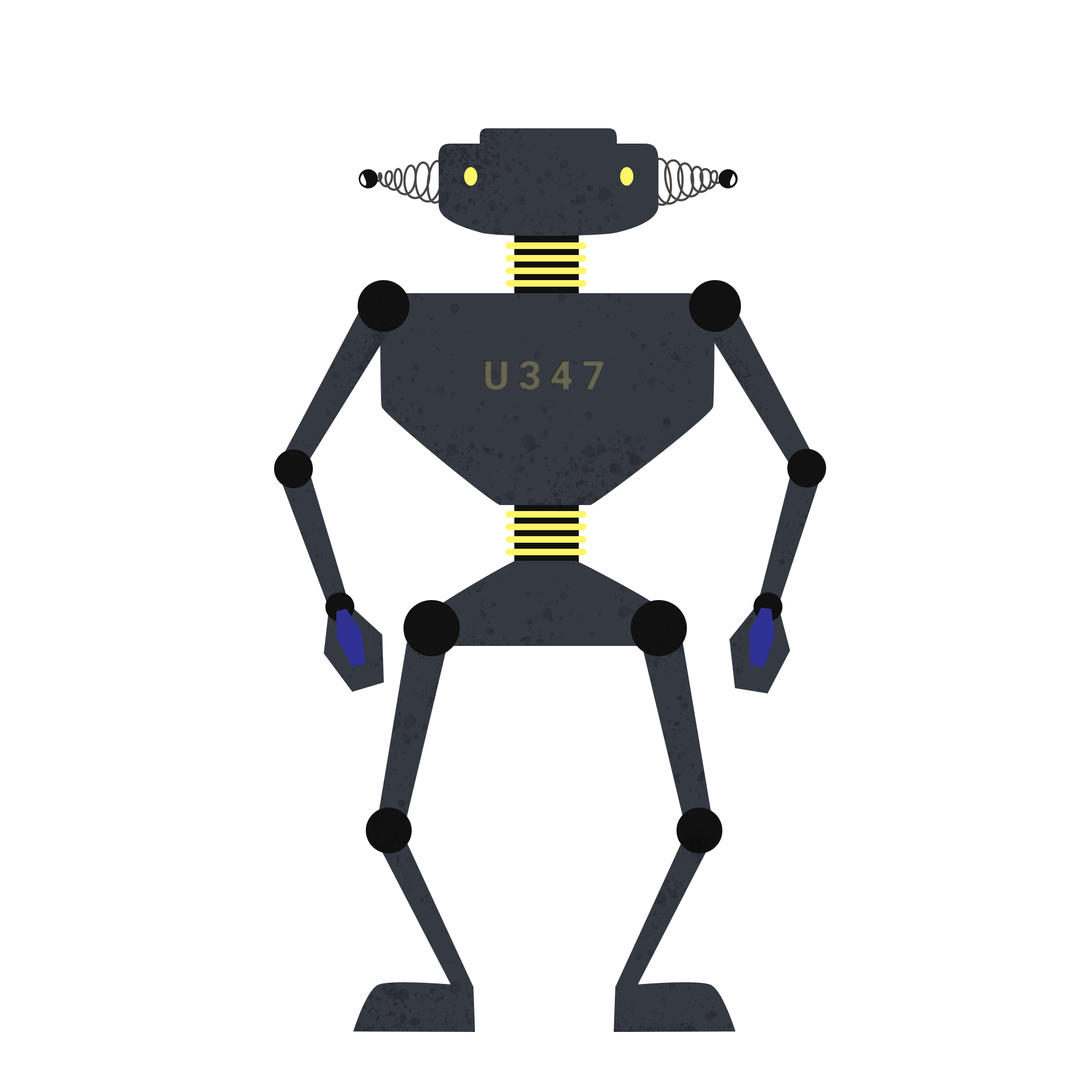
<style>
.page{position:relative;width:1092px;height:1092px;background:#ffffff}
.page>*{position:absolute;margin:0}
.t1{font:40.9px "Roboto-Black";letter-spacing:0.2em;color:#676651}
</style>
<div class="page">
<p class="t1" style="left:484px;top:360px;width:120px;height:30px">U347</p>
</div>
